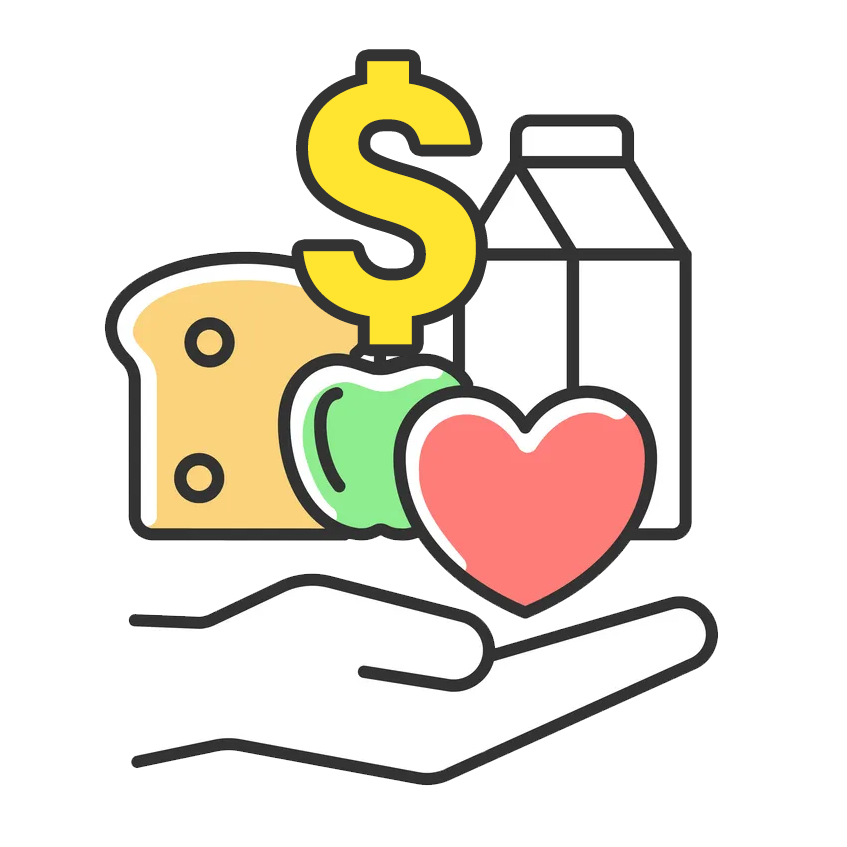
<style>
.page{position:relative;width:847px;height:847px;background:#ffffff}
.page>*{position:absolute;margin:0}
.t1{font:350px "AcuminConcept-Bold";color:#ffe430}
</style>
<div class="page">
<p class="t1" style="left:303px;top:61px;width:173px;height:284px">$</p>
</div>
